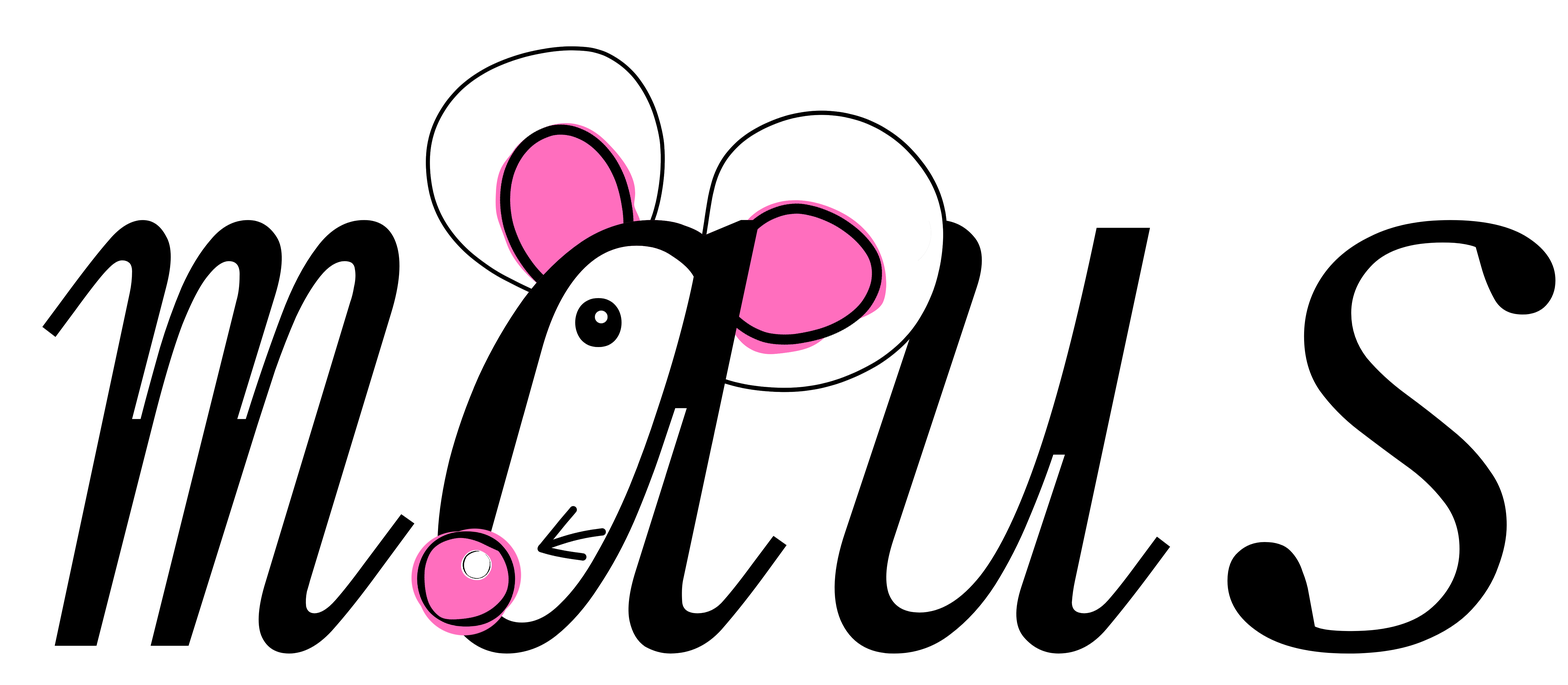
<style>
.page{position:relative;width:1568px;height:685px;background:#ffffff}
.page>*{position:absolute;margin:0}
.t1{font:773.5px "XanhMono-Italic";color:#000000}
</style>
<div class="page">
<p class="t1" style="left:42px;top:220px;width:1514px;height:433px">maus</p>
</div>
